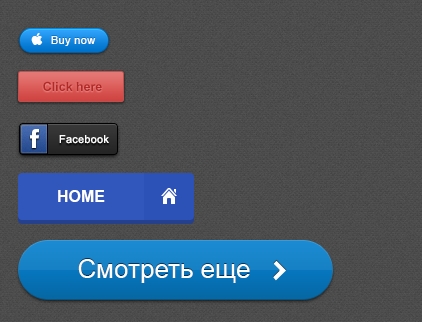
<style>
.page{position:relative;width:422px;height:322px}
.page>*{position:absolute;margin:0}
.t1{font:11px "ArialMT";letter-spacing:0.03em;color:#ffffff}
.t2{font:12.4px "Arial-BoldMT";color:#b42825}
.t3{font:11px "ArialMT";letter-spacing:0.02em;color:#ffffff}
.t4{font:16px "Arial-BoldMT";color:#ffffff;text-transform:uppercase}
.t5{font:26px "ArialMT";color:#ffffff}
</style>
<div class="page">
<p class="t1" style="left:51px;top:36px;width:45px;height:10px">Buy now</p>
<p class="t2" style="left:43px;top:81px;width:59px;height:10px">Click here</p>
<p class="t3" style="left:59px;top:135px;width:50px;height:9px">Facebook</p>
<p class="t4" style="left:58px;top:190px;width:47px;height:12px">Home</p>
<p class="t5" style="left:78px;top:259px;width:172px;height:24px">Смотреть еще</p>
</div>
